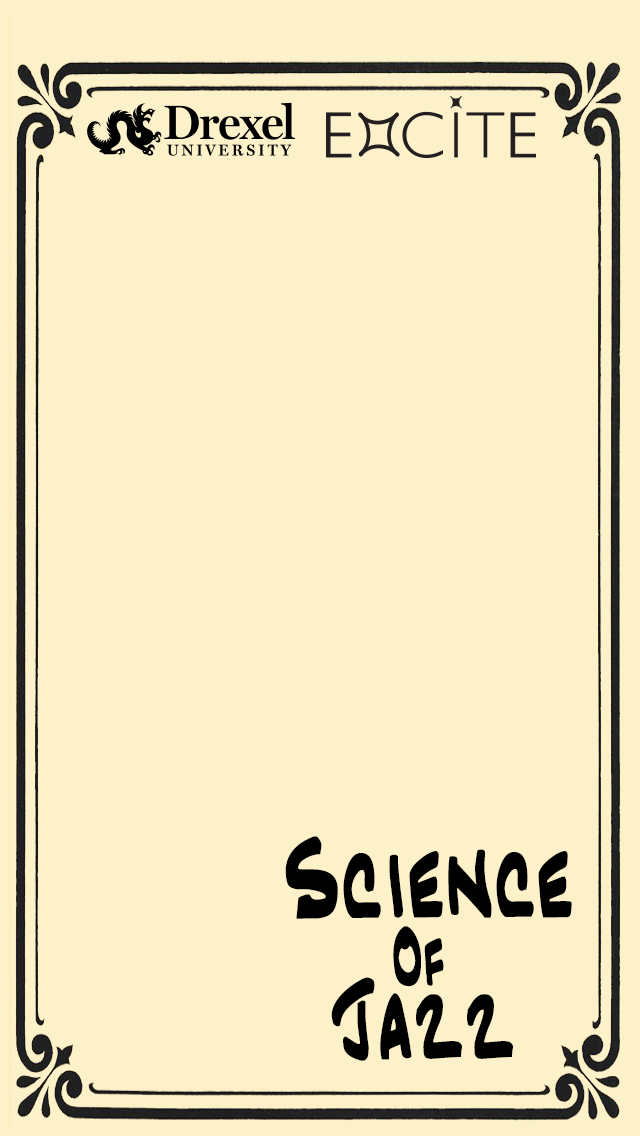
<style>
.page{position:relative;width:640px;height:1136px;background:#fdf1ca}
.page>*{position:absolute;margin:0}
.t1{font:100px "JazzText";color:#000000}
.t2{font:71px "JazzText";color:#000000}
</style>
<div class="page">
<p class="t1" style="left:285px;top:836px;width:287px;height:83px">Science</p>
<p class="t2" style="left:393px;top:926px;width:51px;height:61px">Of</p>
<p class="t1" style="left:331px;top:977px;width:182px;height:84px">Jazz</p>
</div>
